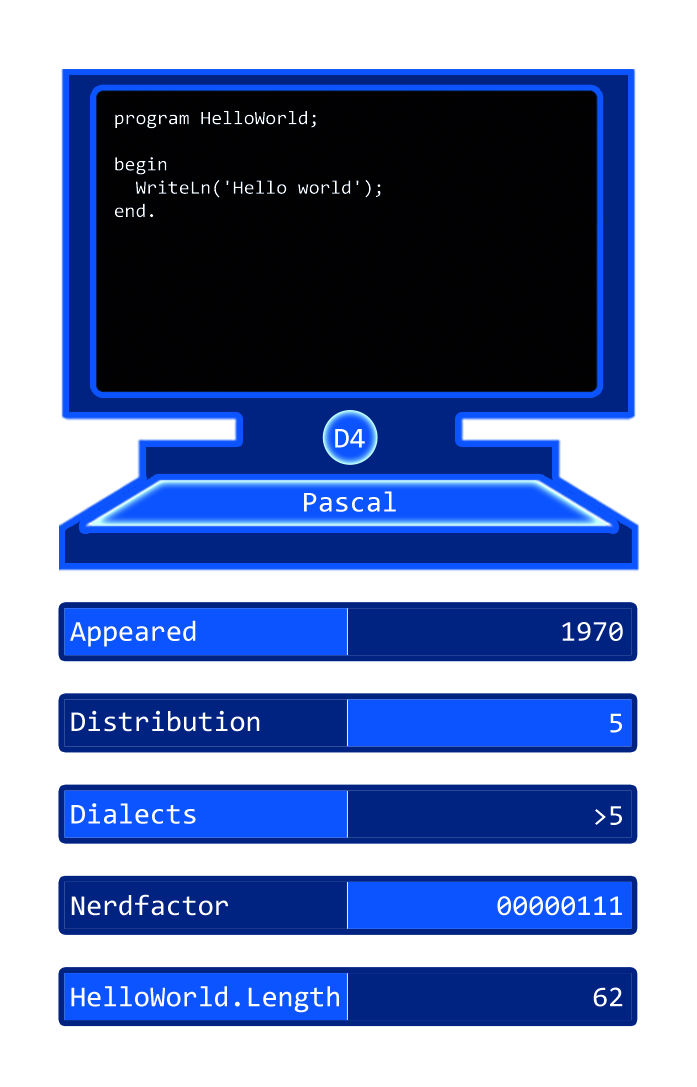
<style>
.page{position:relative;width:697px;height:1087px;background:#ffffff}
.page>*{position:absolute;margin:0}
.t1{font:19.3px "Consolas";color:#ffffff}
.t2{font:29px "Consolas";color:#ffffff}
</style>
<div class="page">
<p class="t1" style="left:115px;top:111px;width:266px;height:107px">program HelloWorld;<br> <br>begin<br>  WriteLn('Hello world');<br>end.</p>
<p class="t2" style="left:335px;top:429px;width:30px;height:19px">D4</p>
<p class="t2" style="left:304px;top:491px;width:92px;height:21px">Pascal</p>
<p class="t2" style="left:70px;top:620px;width:126px;height:27px">Appeared</p>
<p class="t2" style="left:562px;top:622px;width:61px;height:19px">1970</p>
<p class="t2" style="left:71px;top:710px;width:189px;height:22px">Distribution</p>
<p class="t2" style="left:610px;top:713px;width:12px;height:20px">5</p>
<p class="t2" style="left:71px;top:803px;width:125px;height:21px">Dialects</p>
<p class="t2" style="left:595px;top:806px;width:27px;height:19px">&gt;5</p>
<p class="t2" style="left:71px;top:894px;width:157px;height:22px">Nerdfactor</p>
<p class="t2" style="left:497px;top:896px;width:125px;height:20px">00000111</p>
<p class="t2" style="left:71px;top:986px;width:268px;height:27px">HelloWorld.Length</p>
<p class="t2" style="left:593px;top:987px;width:30px;height:20px">62</p>
</div>
